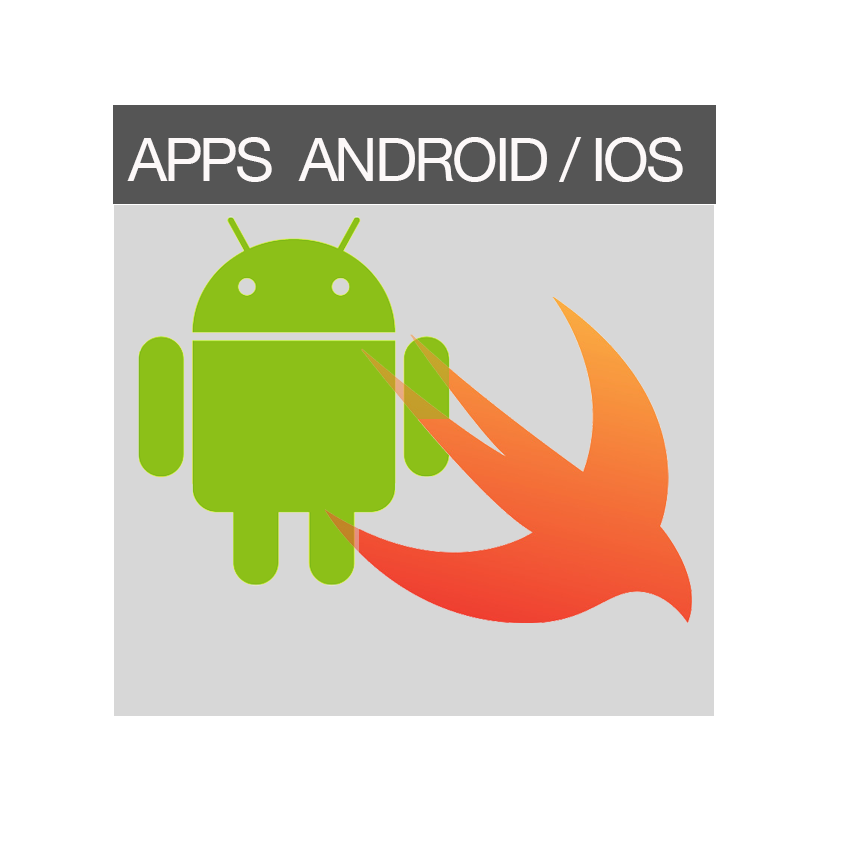
<style>
.page{position:relative;width:850px;height:850px;background:#ffffff}
.page>*{position:absolute;margin:0}
.t1{font:60px "HelveticaNeue";letter-spacing:-0.05em;color:#fcf8f8}
</style>
<div class="page">
<p class="t1" style="left:127px;top:137px;width:556px;height:45px">APPS  ANDROID / IOS</p>
</div>
